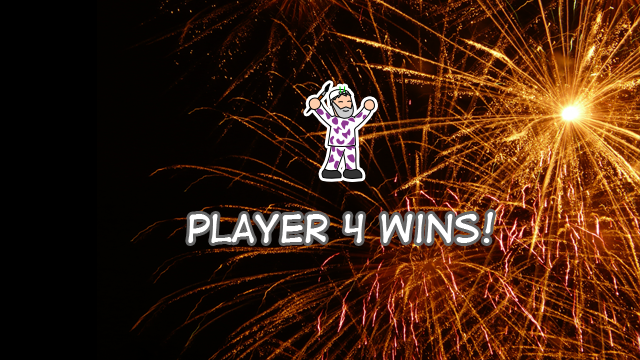
<style>
.page{position:relative;width:640px;height:360px}
.page>*{position:absolute;margin:0}
.t1{font:36px "DigitalStrip";color:#ffffff}
</style>
<div class="page">
<p class="t1" style="left:188px;top:212px;width:305px;height:31px">player 4 wins!</p>
</div>
